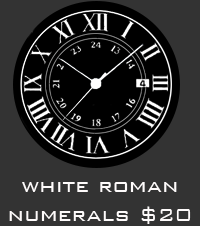
<style>
.page{position:relative;width:200px;height:226px;background:#333333}
.page>*{position:absolute;margin:0}
.t1{font:24px "BankGothicBT-Light";color:#fefbfb}
</style>
<div class="page">
<p class="t1" style="left:9px;top:182px;width:182px;height:42px;text-align:center">white roman<br>numerals $20</p>
</div>
